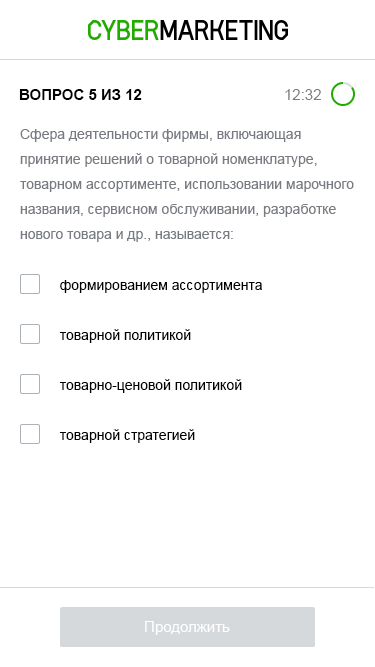
<style>
.page{position:relative;width:375px;height:667px;background:#ffffff}
.page>*{position:absolute;margin:0}
.t1{font:15px "Arial-BoldMT";color:#000000;text-transform:uppercase}
.t2{font:15px "ArialMT";color:#787b81}
.t3{font:14px/25px "ArialMT";color:#787b81}
.t4{font:14px/50px "ArialMT";color:#000000}
.t5{font:15px "ArialMT";color:#ffffff}
</style>
<div class="page">
<p class="t1" style="left:19px;top:89px;width:123px;height:11px">Вопрос 5 из 12</p>
<p class="t2" style="left:285px;top:89px;width:36px;height:11px">12:32</p>
<p class="t3" style="left:20px;top:129px;width:334px;height:113px">Сфера деятельности фирмы, включающая<br>принятие решений о товарной номенклатуре, товарном ассортименте, использовании марочного названия, сервисном обслуживании, разработке нового товара и др., называется:</p>
<p class="t4" style="left:59px;top:280px;width:203px;height:163px">формированием ассортимента<br>товарной политикой<br>товарно-ценовой политикой<br>товарной стратегией</p>
<p class="t5" style="left:145px;top:621px;width:85px;height:14px">Продолжить</p>
</div>
